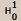
<style>
.page{position:relative;width:21px;height:21px;background:#d9cdc1}
.page>*{position:absolute;margin:0}
.t1{font:9px "Tahoma";color:#000000}
.t2{font:9px "Tahoma"}
</style>
<div class="page">
<p class="t1" style="left:12px;top:1px;width:5px;height:7px">1</p>
<p class="t1" style="left:5px;top:7px;width:6px;height:7px">H</p>
<p class="t2" style="left:12px;top:13px;width:5px;height:8px">0</p>
</div>
